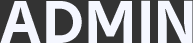
<style>
.page{position:relative;width:193px;height:43px;background:#f5f7ff}
.page>*{position:absolute;margin:0}
.t1{font:60px "Solomon-Sans-Bold";letter-spacing:0.01em;color:#f5f7ff}
</style>
<div class="page">
<p class="t1" style="left:0px;top:0px;width:193px;height:43px">ADMIN</p>
</div>
